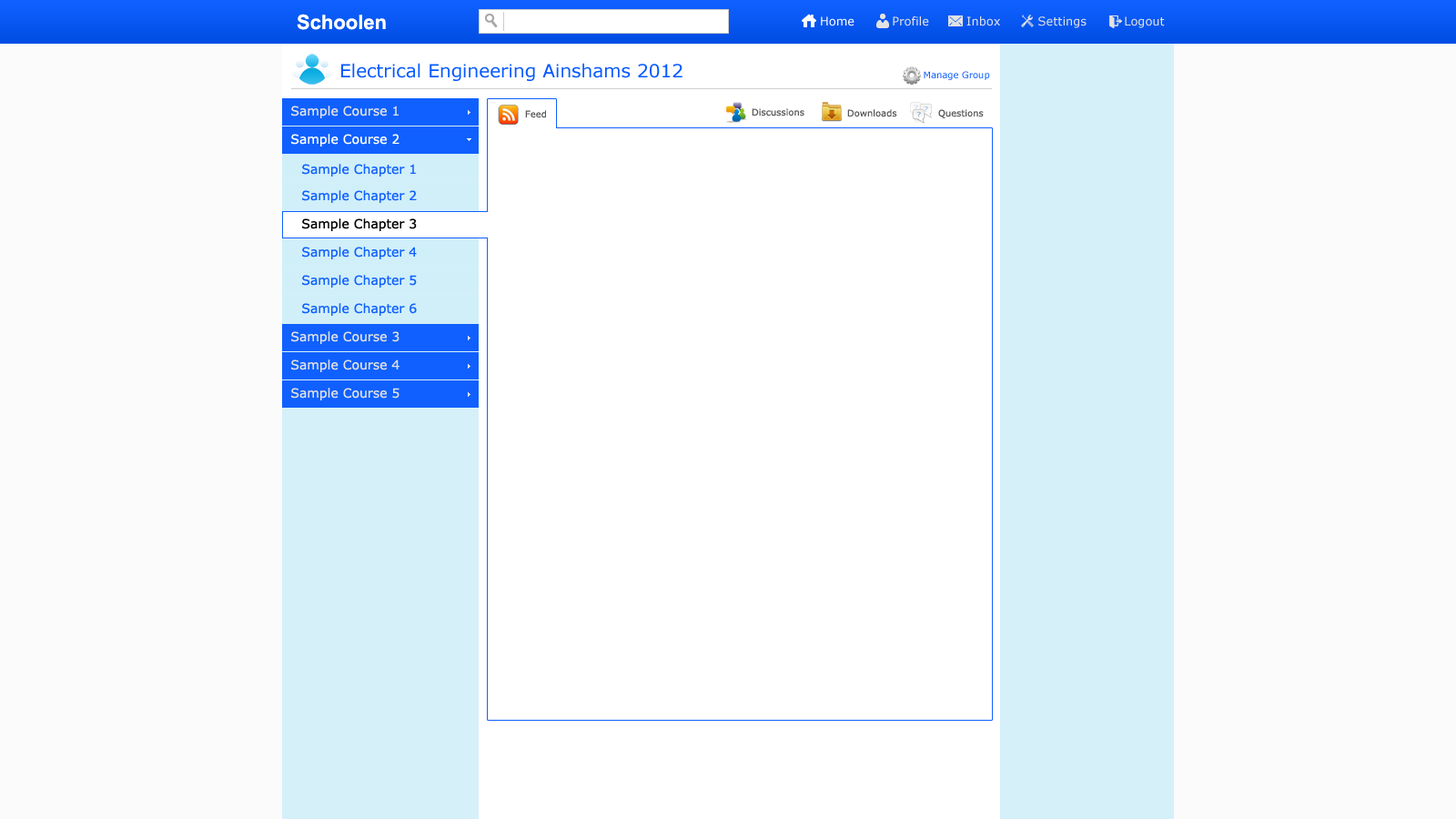
<style>
.page{position:relative;width:1456px;height:819px;background:#fbfbfb}
.page>*{position:absolute;margin:0}
.t1{font:20px "Arial-BoldMT";color:#ffffff}
.t2{font:11.8px "Verdana";color:#e2e2e2}
.t3{font:11.8px "Verdana";color:#ffffff}
.t4{font:18.2px "Verdana";color:#0359ff}
.t5{font:9.1px "Verdana";color:#0f60ff}
.t6{font:12.7px "Verdana";color:#d6d6d6}
.t7{font:9.1px "Verdana";color:#595959}
.t8{font:12.7px "Verdana";color:#ffffff}
.t9{font:12.7px "Verdana";color:#0f60ff}
.t10{font:12.7px "Verdana";color:#000000}
</style>
<div class="page">
<p class="t1" style="left:297px;top:14px;width:89px;height:16px">Schoolen</p>
<p class="t2" style="left:821px;top:16px;width:344px;height:12px"><span class="t3">Home         </span>Profile         Inbox         Settings         Logout</p>
<p class="t4" style="left:341px;top:63px;width:341px;height:18px">Electrical Engineering Ainshams 2012</p>
<p class="t5" style="left:924px;top:71px;width:66px;height:9px">Manage Group</p>
<p class="t6" style="left:291px;top:106px;width:108px;height:12px">Sample Course 1</p>
<p class="t7" style="left:525px;top:110px;width:21px;height:8px">Feed</p>
<p class="t7" style="left:752px;top:108px;width:52px;height:8px">Discussions</p>
<p class="t7" style="left:847px;top:109px;width:50px;height:8px">Downloads</p>
<p class="t7" style="left:938px;top:109px;width:46px;height:9px">Questions</p>
<p class="t8" style="left:291px;top:134px;width:108px;height:13px">Sample Course 2</p>
<p class="t9" style="left:302px;top:164px;width:114px;height:13px">Sample Chapter 1</p>
<p class="t9" style="left:302px;top:190px;width:115px;height:13px">Sample Chapter 2</p>
<p class="t10" style="left:302px;top:218px;width:115px;height:13px">Sample Chapter 3</p>
<p class="t9" style="left:302px;top:247px;width:115px;height:12px">Sample Chapter 4</p>
<p class="t9" style="left:302px;top:275px;width:115px;height:13px">Sample Chapter 5</p>
<p class="t9" style="left:302px;top:303px;width:115px;height:13px">Sample Chapter 6</p>
<p class="t6" style="left:291px;top:331px;width:108px;height:13px">Sample Course 3</p>
<p class="t6" style="left:291px;top:359px;width:108px;height:13px">Sample Course 4</p>
<p class="t6" style="left:291px;top:388px;width:108px;height:12px">Sample Course 5</p>
</div>
